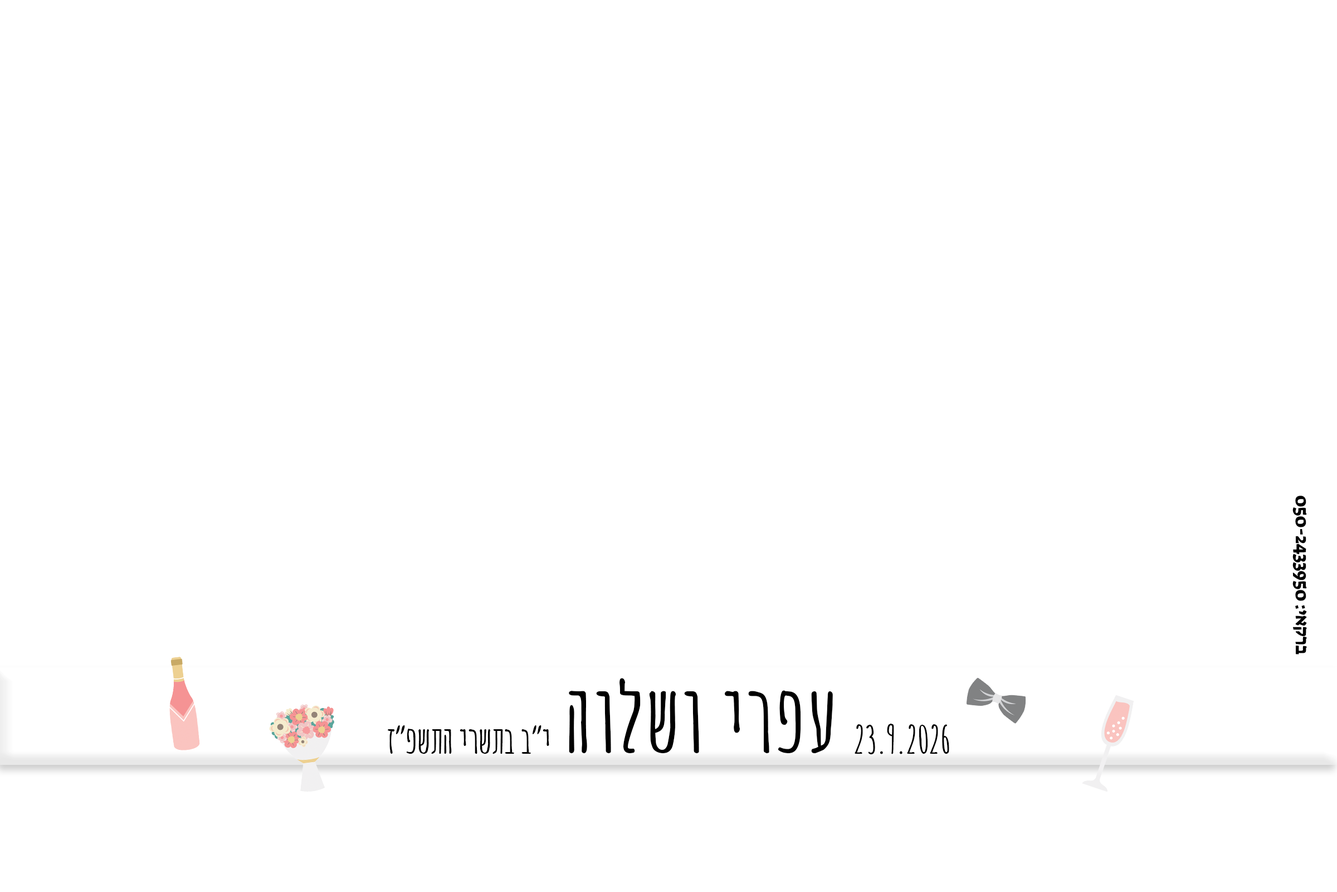
<style>
.page{position:relative;width:1337px;height:892px;background:#ffffff}
.page>*{position:absolute;margin:0}
.t1{font:18.6px "SuezOne-Regular";letter-spacing:-0.025em;color:#000000}
.t2{font:92.9px "AmaticSC-Bold";color:#000000}
.t3{font:37.2px "AmaticSC-Bold";letter-spacing:-0.025em;color:#000000}
</style>
<div class="page">
<p class="t1" style="left:1293px;top:495px;width:14px;height:159px;rotate:90deg">ברקאי: 050-2433950</p>
<p class="t2" style="left:569px;top:678px;width:264px;height:75px">עפרי ושלוה</p>
<p class="t3" style="left:388px;top:725px;width:161px;height:28px">י״ב בתשרי התשפ״ז</p>
<p class="t3" style="left:855px;top:723px;width:95px;height:31px">23.9.2026</p>
</div>
